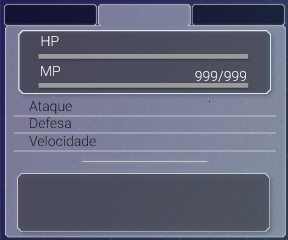
<style>
.page{position:relative;width:288px;height:240px}
.page>*{position:absolute;margin:0}
.t1{font:14px "Roboto-Light"}
.t2{font:14px "Roboto-Light";color:#010000}
</style>
<div class="page">
<p class="t1" style="left:41px;top:36px;width:18px;height:10px">HP</p>
<p class="t1" style="left:41px;top:66px;width:19px;height:10px">MP</p>
<p class="t1" style="left:195px;top:71px;width:51px;height:11px">999/999</p>
<p class="t1" style="left:29px;top:101px;width:43px;height:13px">Ataque</p>
<p class="t1" style="left:30px;top:117px;width:41px;height:12px">Defesa</p>
<p class="t2" style="left:29px;top:135px;width:67px;height:12px">Velocidade</p>
</div>
